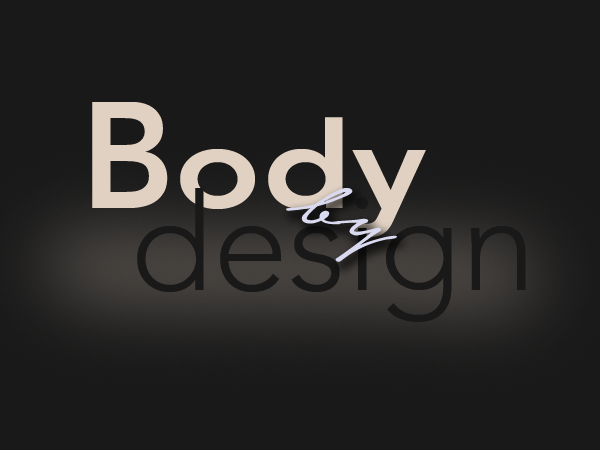
<style>
.page{position:relative;width:600px;height:450px;background:#191919}
.page>*{position:absolute;margin:0}
.t1{font:120px "Avenir-Heavy";letter-spacing:0.005em;color:#e0d1c2;scale:1.19 1}
.t2{font:150px "Avenir-Heavy";letter-spacing:0.005em;color:#e0d1c2;scale:0.95 1}
.t3{font:120px "Avenir-Heavy";color:#e0d1c2;scale:1.19 1}
.t4{font:93.7px "NoteraPersonalUseOnly";color:#d9daf0;scale:1.5 1}
</style>
<div class="page">
<p class="t1" style="left:92px;top:102px;width:334px;height:135px"><span class="t2">B</span>od<span class="t3">y</span></p>
<p class="t4" style="left:286px;top:188px;width:111px;height:74px;rotate:15deg">by</p>
</div>
